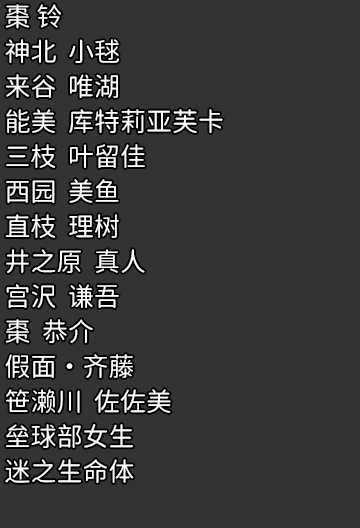
<style>
.page{position:relative;width:360px;height:528px;background:#333333}
.page>*{position:absolute;margin:0}
.t1{font:26px/35px "Resource-Han-Rounded-CN-Regular";color:#ffffff}
</style>
<div class="page">
<p class="t1" style="left:5px;top:4px;width:218px;height:479px">棗 铃<br>神北  小毬<br>来谷  唯湖<br>能美  库特莉亚芙卡<br>三枝  叶留佳<br>西园  美鱼<br>直枝  理树<br>井之原  真人<br>宫沢  谦吾<br>棗  恭介  <br>假面·齐藤<br>笹濑川  佐佐美<br>垒球部女生<br>迷之生命体</p>
</div>
